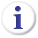
<style>
.page{position:relative;width:38px;height:38px;background:#ffffff}
.page>*{position:absolute;margin:0}
.t1{font:30px "Georgia-Bold";color:#3d40a2}
</style>
<div class="page">
<p class="t1" style="left:13px;top:6px;width:10px;height:23px">i</p>
</div>
